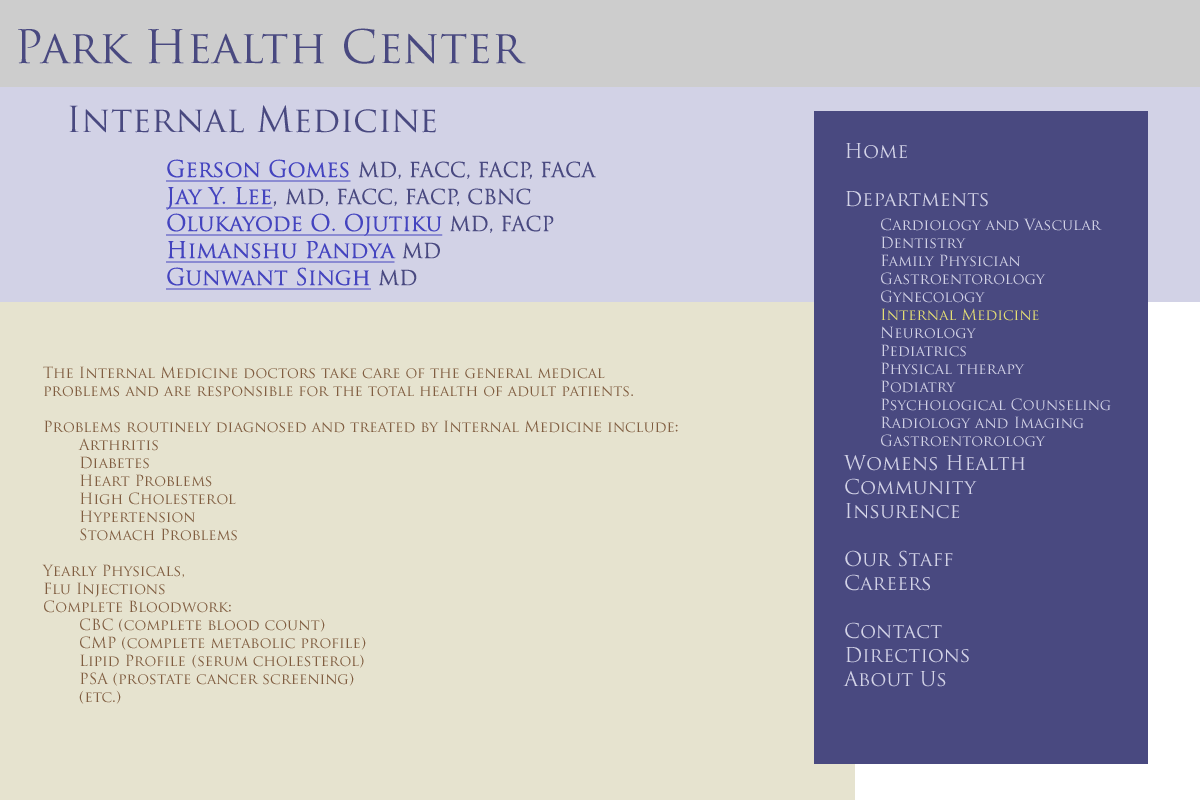
<style>
.page{position:relative;width:1200px;height:800px;background:#e6e3cf}
.page>*{position:absolute;margin:0}
.t1{font:45px "TrajanPro-Regular";color:#494980}
.t2{font:35px "TrajanPro-Regular";color:#494980}
.t3{font:15px "TrajanPro-Regular";color:#d2d2e6}
.t4{font:20px "TrajanPro-Regular";color:#d2d2e6}
.t5{font:15px "TrajanPro-Regular";color:#e6e073}
.t6{font:20px "TrajanPro-Regular";color:#494980}
.t7{font:22.5px "TrajanPro-Regular";color:#4444bf;text-decoration:underline}
.t8{font:22.5px "TrajanPro-Regular";color:#494980}
.t9{font:15px "TrajanPro-Regular";color:#805d40}
</style>
<div class="page">
<p class="t1" style="left:18px;top:28px;width:508px;height:36px">Park Health Center</p>
<p class="t2" style="left:69px;top:105px;width:367px;height:28px">Internal Medicine</p>
<p class="t3" style="left:843px;top:143px;width:268px;height:544px"><span class="t4">Home<br><br>Departments<br> </span>Cardiology and Vascular<br> Dentistry<br> Family Physician<br> Gastroentorology<br> Gynecology<br><span class="t5"> Internal Medicine</span><br> Neurology<br> Pediatrics<br> Physical therapy<br> Podiatry<br> Psychological Counseling<br> Radiology and Imaging<br> Gastroentorology<br><span class="t4">Womens Health<br>Community<br>Insurence<br><br>Our Staff<br>Careers<br><br>Contact<br>Directions<br>About Us</span></p>
<p class="t6" style="left:166px;top:159px;width:430px;height:131px"><span class="t7">Gerson Gomes </span>MD, FACC, FACP, FACA<br><span class="t7">Jay Y. Lee</span><span class="t8">, </span>MD, FACC, FACP, CBNC<br><span class="t7">Olukayode O. Ojutiku </span>MD, FACP<br><span class="t7">Himanshu Pandya </span>MD<br><span class="t7">Gunwant Singh </span>MD</p>
<p class="t9" style="left:42px;top:366px;width:636px;height:338px">The Internal Medicine doctors take care of the general medical<br>problems and are responsible for the total health of adult patients.<br><br>Problems routinely diagnosed and treated by Internal Medicine include:<br> Arthritis<br> Diabetes<br> Heart Problems<br> High Cholesterol<br> Hypertension<br> Stomach Problems<br><br>Yearly Physicals,<br>Flu Injections<br>Complete Bloodwork:<br> CBC (complete blood count)<br> CMP (complete metabolic profile)<br> Lipid Profile  (serum cholesterol)<br> PSA (prostate cancer screening)<br> (etc.)</p>
</div>
